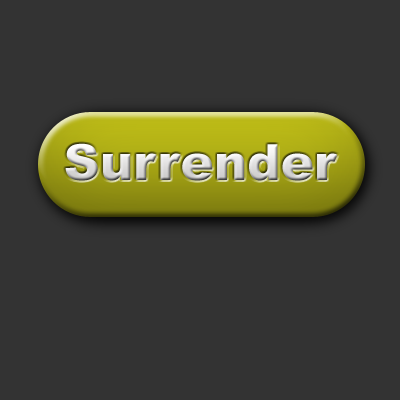
<style>
.page{position:relative;width:400px;height:400px;background:#333333}
.page>*{position:absolute;margin:0}
.t1{font:50px "Arial-Black"}
</style>
<div class="page">
<p class="t1" style="left:65px;top:143px;width:273px;height:38px">Surrender</p>
</div>
